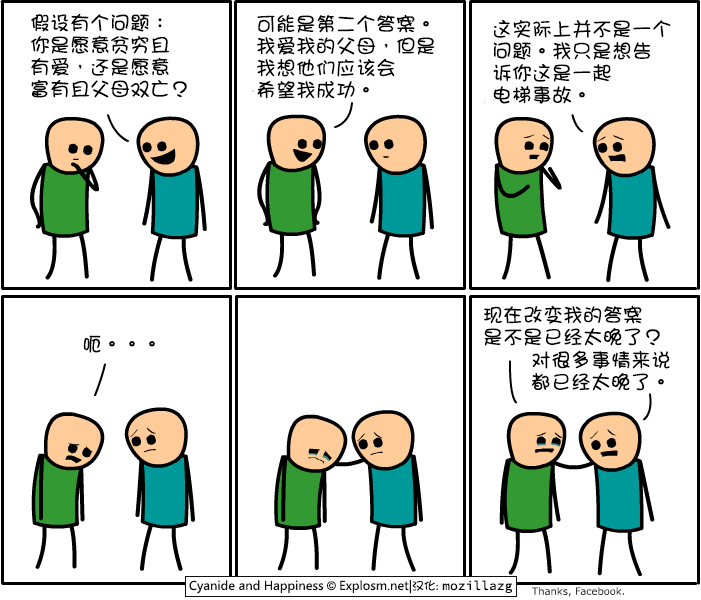
<style>
.page{position:relative;width:701px;height:600px;background:#ffffff}
.page>*{position:absolute;margin:0}
.t1{font:20px/22px "DFGirl";color:#000000}
.t2{font:20px "DFGirl";color:#000000}
</style>
<div class="page">
<p class="t1" style="left:30px;top:13px;width:157px;height:85px">假设有个问题：<br>你是愿意贫穷且<br>有爱，还是愿意<br>富有且父母双亡？</p>
<p class="t1" style="left:256px;top:14px;width:179px;height:85px">可能是第二个答案。<br>我爱我的父母，但是<br>我想他们应该会<br>希望我成功。</p>
<p class="t1" style="left:493px;top:19px;width:178px;height:85px">这实际上并不是一个<br>问题。我只是想告<br>诉你这是一起<br>电梯事故。</p>
<p class="t1" style="left:484px;top:305px;width:176px;height:41px">现在改变我的答案<br>是不是已经太晚了？</p>
<p class="t2" style="left:83px;top:335px;width:72px;height:18px">呃。。。</p>
<p class="t1" style="left:531px;top:350px;width:139px;height:41px">对很多事情来说<br>都已经太晚了。</p>
</div>
